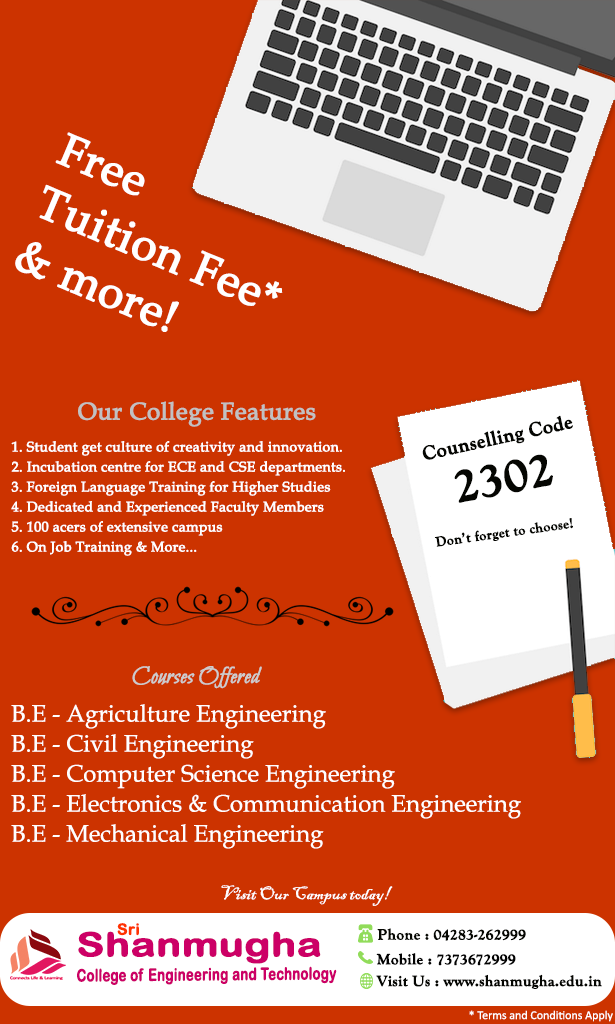
<style>
.page{position:relative;width:615px;height:1024px;background:#cc3300}
.page>*{position:absolute;margin:0}
.t1{font:45.5px/28.4px "BookAntiqua";color:#ffffff;font-weight:bold}
.t2{font:24px "BookAntiqua";color:#c1c1c1;font-weight:bold}
.t3{font:20px "GoudyOldStyleT-Bold";color:#050602;font-weight:bold}
.t4{font:14px/20px "BookAntiqua";color:#ffffff;font-weight:bold}
.t5{font:48px "GoudyOldStyleT-Bold";color:#050602;font-weight:bold}
.t6{font:14px "GoudyOldStyleT-Bold";color:#050602;font-weight:bold}
.t7{font:24px "BilboSwashCaps-Regular";color:#cccccc;font-weight:bold}
.t8{font:24px "BookAntiqua";color:#ffffff}
.t9{font:19px "BlackadderITC-Regular";color:#ffffff}
.t10{font:15.4px "ArialRoundedMTBold";color:#ff3300;font-weight:bold}
.t11{font:15.2px "GoudyOldStyleT-Bold";color:#060702;font-weight:bold}
.t12{font:33px "ArialRoundedMTBold";color:#cc0066;font-weight:bold;scale:1.24 1}
.t13{font:15.2px "GoudyOldStyleT-Bold";color:#020202;font-weight:bold}
.t14{font:17px "ArialRoundedMTBold";color:#cc0066;font-weight:bold;scale:0.76 1}
.t15{font:15.2px "GoudyOldStyleT-Bold";color:#050602;font-weight:bold}
.t16{font:12px "Calibri";color:#ffffff}
</style>
<div class="page">
<p class="t1" style="left:15px;top:132px;width:268px;height:200px;rotate:23deg">Free<br><br>Tuition Fee*<br><br>&amp; more!</p>
<p class="t2" style="left:78px;top:401px;width:238px;height:26px">Our College Features</p>
<p class="t3" style="left:422px;top:415px;width:151px;height:45px;rotate:-12deg">Counselling Code</p>
<p class="t4" style="left:11px;top:441px;width:334px;height:115px">1. Student get culture of creativity and innovation.<br>2. Incubation centre for ECE and CSE departments.<br>3. Foreign Language Training for Higher Studies <br>4. Dedicated and Experienced Faculty Members<br>5. 100 acers of extensive campus<br>6. On Job Training &amp; More...</p>
<p class="t5" style="left:454px;top:454px;width:99px;height:49px;rotate:-11deg">2302</p>
<p class="t6" style="left:434px;top:518px;width:139px;height:29px;rotate:-8deg">Don’t forget to choose!</p>
<p class="t7" style="left:132px;top:666px;width:130px;height:23px">Courses Offered</p>
<p class="t8" style="left:11px;top:704px;width:315px;height:25px">B.E - Agriculture Engineering</p>
<p class="t8" style="left:11px;top:734px;width:243px;height:25px">B.E - Civil Engineering</p>
<p class="t8" style="left:11px;top:764px;width:384px;height:25px">B.E - Computer Science Engineering</p>
<p class="t8" style="left:11px;top:794px;width:510px;height:25px">B.E - Electronics &amp; Communication Engineering</p>
<p class="t8" style="left:11px;top:824px;width:313px;height:25px">B.E - Mechanical Engineering</p>
<p class="t9" style="left:221px;top:885px;width:172px;height:21px">Visit Our Campus today!</p>
<p class="t10" style="left:117px;top:923px;width:22px;height:13px">Sri</p>
<p class="t11" style="left:377px;top:928px;width:149px;height:13px">Phone : 04283-262999</p>
<p class="t12" style="left:78px;top:931px;width:243px;height:33px">Shanmugha</p>
<p class="t13" style="left:376px;top:953px;width:140px;height:13px">Mobile : 7373672999</p>
<p class="t14" style="left:77px;top:966px;width:260px;height:19px">College of Engineering and Technology</p>
<p class="t15" style="left:376px;top:974px;width:226px;height:15px">Visit Us : www.shanmugha.edu.in</p>
<p class="t16" style="left:469px;top:1010px;width:144px;height:12px">* Terms and Conditions Apply</p>
</div>
